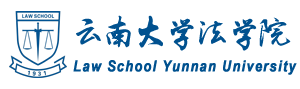
<style>
.page{position:relative;width:300px;height:89px;background:#ffffff}
.page>*{position:absolute;margin:0}
.t1{font:34px "Li-Xuke";letter-spacing:-0.08em;color:#00518f}
.t2{font:15.5px "ArialNarrow-BoldItalic";letter-spacing:0.06em;color:#00518f;font-weight:bold}
</style>
<div class="page">
<p class="t1" style="left:76px;top:15px;width:215px;height:36px">云南大学法学院</p>
<p class="t2" style="left:73px;top:60px;width:224px;height:15px">Law School Yunnan University</p>
</div>
